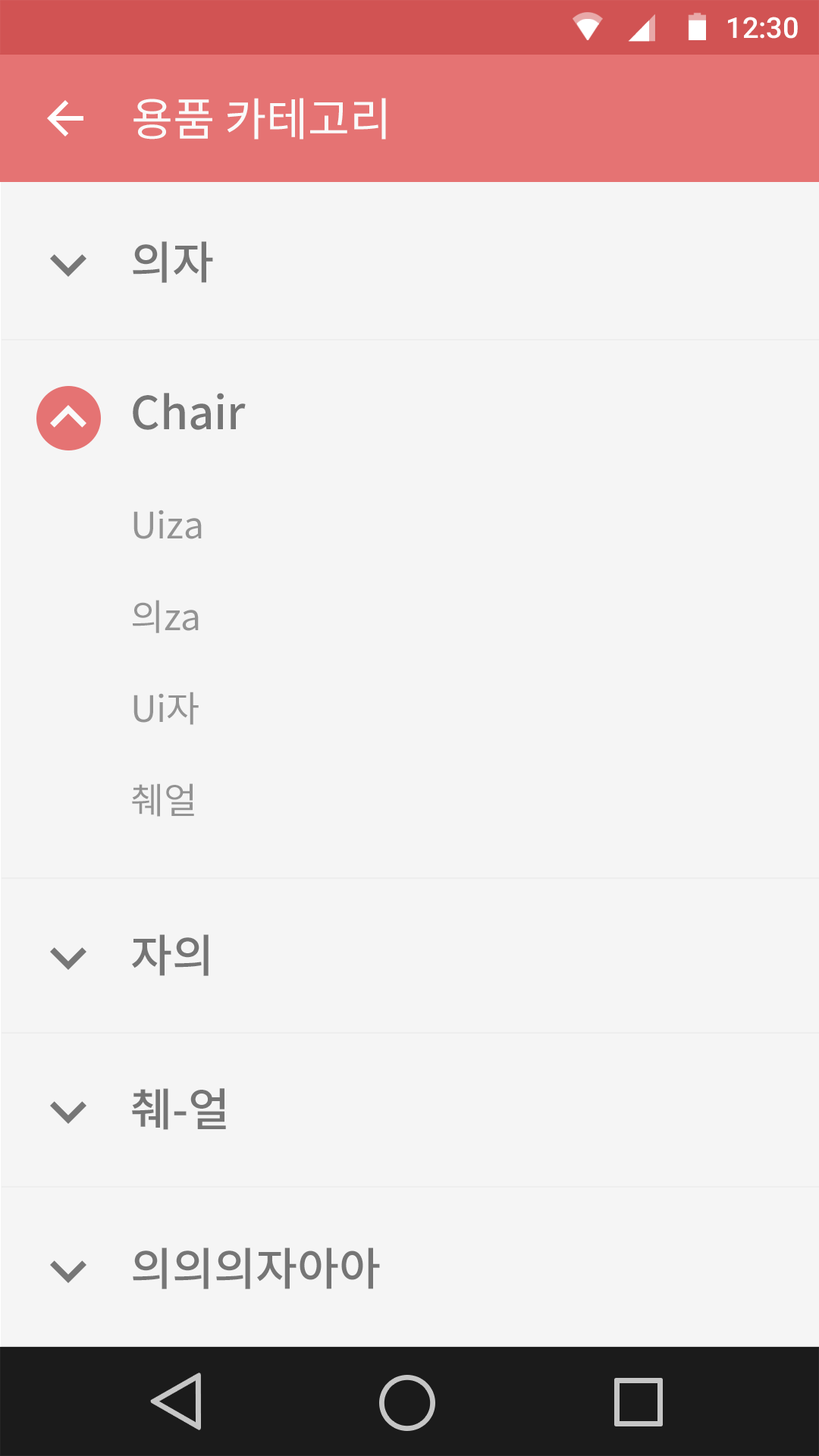
<style>
.page{position:relative;width:819px;height:1456px;background:#f5f5f5}
.page>*{position:absolute;margin:0}
.t1{font:28.8px "Roboto-Medium";color:#ffffff}
.t2{font:45.5px "NotoSansCJKkr-Regular";letter-spacing:-0.005em;color:#fafafa}
.t3{font:45.5px "NotoSansCJKkr-Medium";letter-spacing:-0.005em;color:#757575}
.t4{font:36.4px "NotoSansCJKkr-Regular";letter-spacing:-0.005em;color:#939393}
</style>
<div class="page">
<p class="t1" style="left:728px;top:17px;width:70px;height:22px">12:30</p>
<p class="t2" style="left:133px;top:98px;width:253px;height:42px">용품 카테고리</p>
<p class="t3" style="left:133px;top:241px;width:80px;height:42px">의자</p>
<p class="t3" style="left:133px;top:393px;width:113px;height:37px">Chair</p>
<p class="t4" style="left:133px;top:510px;width:69px;height:29px">Uiza</p>
<p class="t4" style="left:132px;top:600px;width:67px;height:33px">의za</p>
<p class="t4" style="left:133px;top:692px;width:66px;height:33px">Ui자</p>
<p class="t4" style="left:132px;top:783px;width:62px;height:34px">췌얼</p>
<p class="t3" style="left:132px;top:934px;width:77px;height:42px">자의</p>
<p class="t3" style="left:132px;top:1088px;width:94px;height:42px">췌-얼</p>
<p class="t3" style="left:133px;top:1247px;width:247px;height:42px">의의의자아아</p>
</div>
